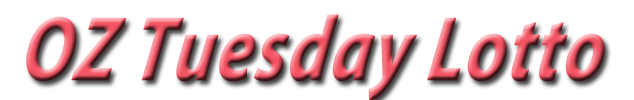
<style>
.page{position:relative;width:634px;height:100px;background:#ffffff}
.page>*{position:absolute;margin:0}
.t1{font:92px "MyriadPro-BoldIt";font-weight:bold;font-style:italic;scale:0.79 1}
</style>
<div class="page">
<p class="t1" style="left:26px;top:14px;width:579px;height:87px">OZ Tuesday Lotto</p>
</div>
